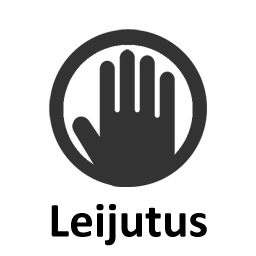
<style>
.page{position:relative;width:256px;height:256px;background:#ffffff}
.page>*{position:absolute;margin:0}
.t1{font:49.2px "Calibri-Bold";color:#000000}
</style>
<div class="page">
<p class="t1" style="left:51px;top:204px;width:156px;height:42px">Leijutus</p>
</div>
